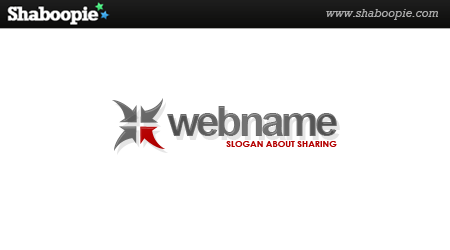
<style>
.page{position:relative;width:450px;height:250px;background:#ffffff}
.page>*{position:absolute;margin:0}
.t1{font:41.7px "Arial-BoldMT";letter-spacing:-0.075em;color:#6b6b6b}
.t2{font:9px "CenturyGothic-Bold";color:#b40000}
</style>
<div class="page">
<p class="t1" style="left:167px;top:106px;width:170px;height:30px">webname</p>
<p class="t2" style="left:226px;top:141px;width:111px;height:6px">SLOGAN ABOUT SHARING</p>
</div>
